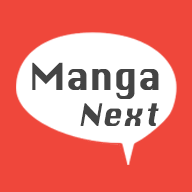
<style>
.page{position:relative;width:192px;height:192px;background:#ef473b}
.page>*{position:absolute;margin:0}
.t1{font:36px/12px "Silom";color:#444444}
.t2{font:30px/36px "Silom";letter-spacing:0.025em;color:#444444;font-style:italic}
</style>
<div class="page">
<p class="t1" style="left:32px;top:62px;width:127px;height:64px">Manga<br>       <span class="t2">Next</span></p>
</div>
